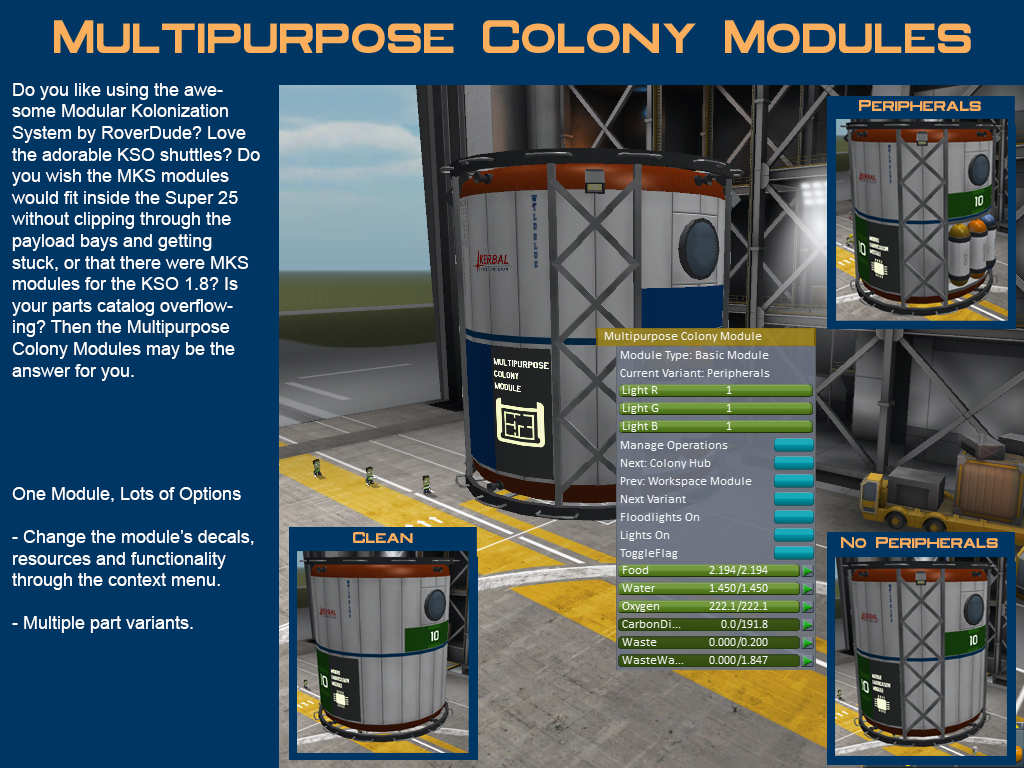
<style>
.page{position:relative;width:1024px;height:768px;background:#003663}
.page>*{position:absolute;margin:0}
.t1{font:18px "ArialMT";color:#ffffff}
.t2{font:12px "OldRepublic-Bold";color:#fbaf5d}
</style>
<div class="page">
<p class="t1" style="left:11px;top:83px;width:249px;height:298px">Do you like using the awesome Modular Kolonization System by RoverDude? Love the adorable KSO shuttles? Do you wish the MKS modules would fit inside the Super 25 without clipping through the payload bays and getting stuck, or that there were MKS modules for the KSO 1.8? Is your parts catalog overflowing? Then the Multipurpose Colony Modules may be the answer for you.</p>
<p class="t2" style="left:859px;top:100px;width:122px;height:11px">Peripherals</p>
<p class="t1" style="left:12px;top:487px;width:242px;height:146px">One Module, Lots of Options<br><br>- Change the module’s decals,<br>resources and functionality<br>through the context menu.<br><br>- Multiple part variants.</p>
<p class="t2" style="left:353px;top:532px;width:60px;height:11px">Clean</p>
<p class="t2" style="left:841px;top:537px;width:157px;height:11px">No Peripherals</p>
</div>
